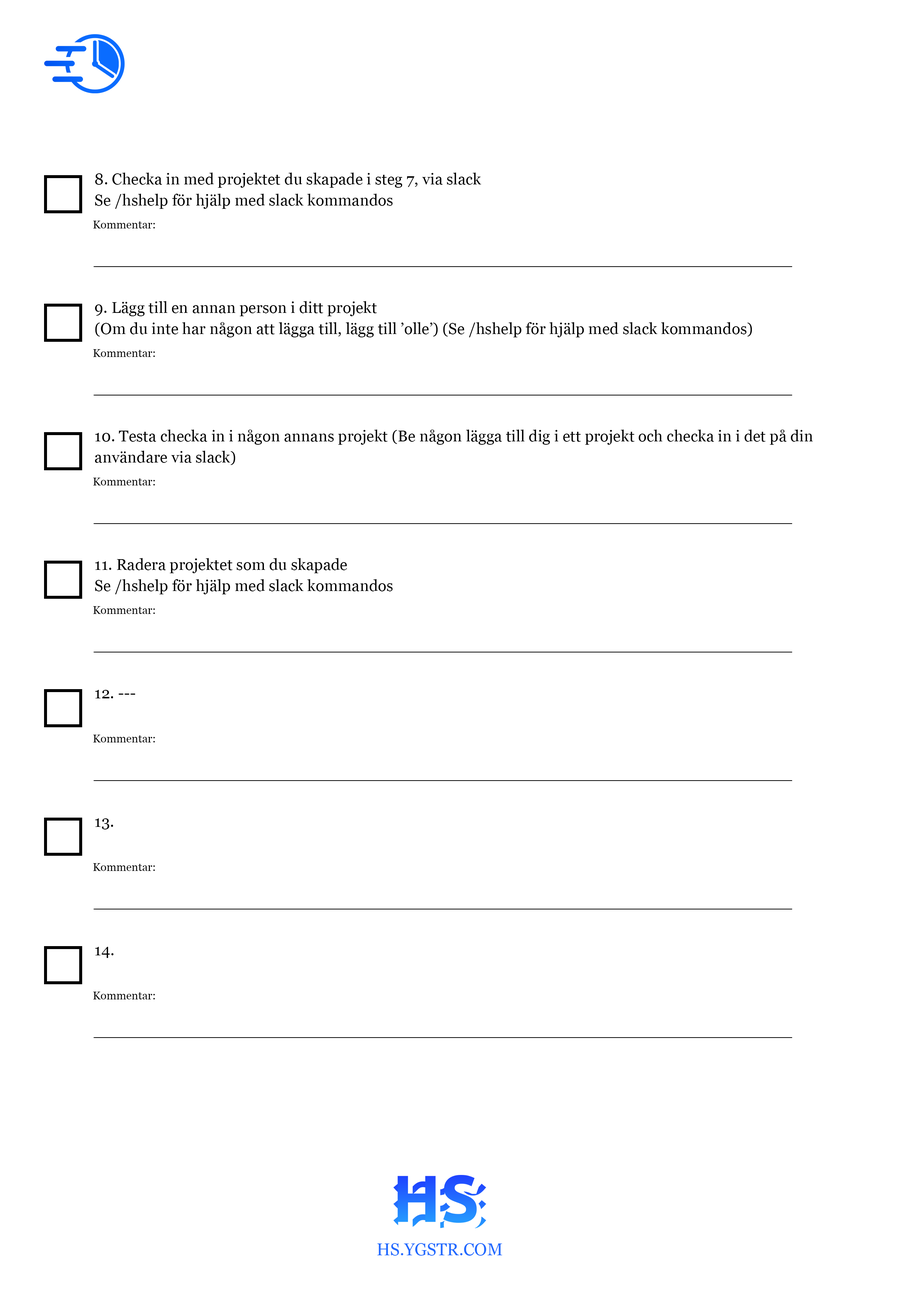
<style>
.page{position:relative;width:918px;height:1299px;background:#ffffff}
.page>*{position:absolute;margin:0}
.t1{font:15.7px/21.4px "Georgia";color:#000000}
.t2{font:11.2px "Georgia";color:#000000}
.t3{font:15.7px "Georgia";color:#000000}
.t4{font:17px "Georgia";color:#216aff}
</style>
<div class="page">
<p class="t1" style="left:95px;top:173px;width:386px;height:36px">8. Checka in med projektet du skapade i steg 7, via slack<br>Se /hshelp för hjälp med slack kommandos</p>
<p class="t2" style="left:93px;top:221px;width:62px;height:7px">Kommentar:</p>
<p class="t1" style="left:95px;top:301px;width:657px;height:36px">9. Lägg till en annan person i ditt projekt<br>(Om du inte har någon att lägga till, lägg till ’olle’) (Se /hshelp för hjälp med slack kommandos)</p>
<p class="t2" style="left:93px;top:349px;width:62px;height:8px">Kommentar:</p>
<p class="t1" style="left:95px;top:429px;width:718px;height:36px">10. Testa checka in i någon annans projekt (Be någon lägga till dig i ett projekt och checka in i det på din användare via slack)</p>
<p class="t2" style="left:93px;top:478px;width:62px;height:7px">Kommentar:</p>
<p class="t1" style="left:95px;top:558px;width:298px;height:36px">11. Radera projektet som du skapade<br>Se /hshelp för hjälp med slack kommandos</p>
<p class="t2" style="left:93px;top:606px;width:62px;height:8px">Kommentar:</p>
<p class="t3" style="left:95px;top:690px;width:40px;height:8px">12. ---</p>
<p class="t2" style="left:93px;top:735px;width:62px;height:7px">Kommentar:</p>
<p class="t3" style="left:95px;top:818px;width:18px;height:11px">13.</p>
<p class="t2" style="left:93px;top:863px;width:62px;height:8px">Kommentar:</p>
<p class="t3" style="left:95px;top:947px;width:19px;height:11px">14.</p>
<p class="t2" style="left:93px;top:991px;width:62px;height:8px">Kommentar:</p>
<p class="t4" style="left:377px;top:1243px;width:125px;height:12px">HS.YGSTR.COM</p>
</div>
